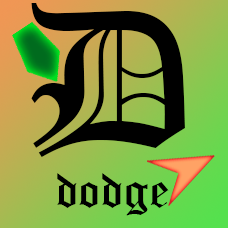
<style>
.page{position:relative;width:228px;height:228px}
.page>*{position:absolute;margin:0}
.t1{font:50px "OldEnglishTextMT";color:#000000}
.t2{font:200px "OldEnglishTextMT";color:#000000}
</style>
<div class="page">
<p class="t1" style="left:31px;top:3px;width:154px;height:213px;text-align:center"><span class="t2">D<br></span>dodge</p>
</div>
